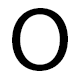
<style>
.page{position:relative;width:80px;height:80px;background:#ffffff}
.page>*{position:absolute;margin:0}
.t1{font:90px "MyriadPro-Regular";color:#000000}
</style>
<div class="page">
<p class="t1" style="left:12px;top:8px;width:56px;height:63px">O</p>
</div>
